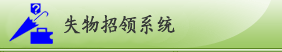
<style>
.page{position:relative;width:282px;height:52px}
.page>*{position:absolute;margin:0}
.t1{font:21.4px "¿¬Ìå";color:#353736;font-weight:bold;scale:0.88 1}
</style>
<div class="page">
<p class="t1" style="left:64px;top:15px;width:111px;height:20px">失物招领系统</p>
</div>
